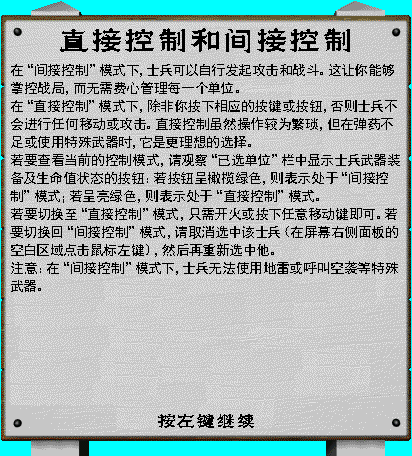
<style>
.page{position:relative;width:412px;height:456px;background:#c6c6c6}
.page>*{position:absolute;margin:0}
.t1{font:30px "???-Regular";letter-spacing:0.1em;color:#000000}
.t2{font:14px/18px "SimHei";color:#000000}
.t3{font:18px "???-Regular";letter-spacing:0.1em;color:#000000}
</style>
<div class="page">
<p class="t1" style="left:60px;top:28px;width:290px;height:25px">直接控制和间接控制</p>
<p class="t2" style="left:10px;top:64px;width:390px;height:228px">在“间接控制”模式下，士兵可以自行发起攻击和战斗。这让你能够掌控战局，而无需费心管理每一个单位。<br>在“直接控制”模式下，除非你按下相应的按键或按钮，否则士兵不会进行任何移动或攻击。直接控制虽然操作较为繁琐，但在弹药不足或使用特殊武器时，它是更理想的选择。<br>若要查看当前的控制模式，请观察“已选单位”栏中显示士兵武器装备及生命值状态的按钮：若按钮呈橄榄绿色，则表示处于“间接控制”模式；若呈亮绿色，则表示处于“直接控制”模式。<br>若要切换至“直接控制”模式，只需开火或按下任意移动键即可。若要切换回“间接控制”模式，请取消选中该士兵（在屏幕右侧面板的空白区域点击鼠标左键），然后再重新选中他。<br>注意：在“间接控制”模式下，士兵无法使用地雷或呼叫空袭等特殊武器。</p>
<p class="t3" style="left:158px;top:414px;width:96px;height:14px">按左键继续</p>
</div>
